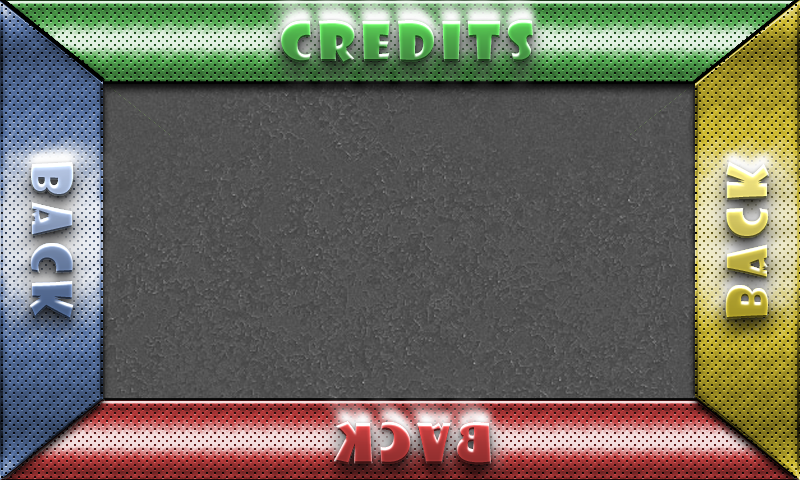
<style>
.page{position:relative;width:800px;height:480px}
.page>*{position:absolute;margin:0}
.t1{font:53.8px "ShowcardGothic-Reg";letter-spacing:0.11em}
</style>
<div class="page">
<p class="t1" style="left:281px;top:19px;width:252px;height:45px">credits</p>
<p class="t1" style="left:281px;top:19px;width:252px;height:45px">credits</p>
<p class="t1" style="left:281px;top:19px;width:252px;height:45px">credits</p>
<p class="t1" style="left:281px;top:19px;width:252px;height:45px">credits</p>
<p class="t1" style="left:725px;top:161px;width:45px;height:158px;rotate:-90deg">back</p>
<p class="t1" style="left:725px;top:161px;width:45px;height:158px;rotate:-90deg">back</p>
<p class="t1" style="left:725px;top:161px;width:45px;height:158px;rotate:-90deg">back</p>
<p class="t1" style="left:725px;top:161px;width:45px;height:158px;rotate:-90deg">back</p>
<p class="t1" style="left:29px;top:162px;width:45px;height:158px;rotate:90deg">back</p>
<p class="t1" style="left:29px;top:162px;width:45px;height:158px;rotate:90deg">back</p>
<p class="t1" style="left:29px;top:162px;width:45px;height:158px;rotate:90deg">back</p>
<p class="t1" style="left:29px;top:162px;width:45px;height:158px;rotate:90deg">back</p>
</div>
